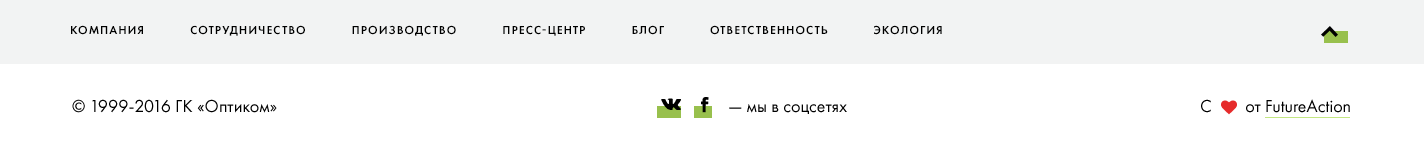
<style>
.page{position:relative;width:1424px;height:158px;background:#ffffff}
.page>*{position:absolute;margin:0}
.t1{font:12px "FuturaPT-Demi";letter-spacing:0.08em;color:#000000;text-transform:uppercase}
.t2{font:18px "FuturaPT-Book";color:#000000}
.t3{font:18px "Symbionite";color:#000000}
.t4{font:16px "Symbionite";color:#e62b2b}
</style>
<div class="page">
<p class="t1" style="left:71px;top:25px;width:871px;height:11px">Компания            Сотрудничество            Производство            Пресс-центр            Блог            Ответственность            Экология</p>
<p class="t2" style="left:72px;top:99px;width:205px;height:14px">© 1999-2016 ГК «Оптиком»</p>
<p class="t3" style="left:661px;top:98px;width:20px;height:12px">vk</p>
<p class="t3" style="left:701px;top:97px;width:8px;height:16px">facebook</p>
<p class="t2" style="left:1201px;top:99px;width:149px;height:14px">С        от FutureAction</p>
<p class="t4" style="left:1221px;top:100px;width:16px;height:15px">heart</p>
<p class="t2" style="left:729px;top:104px;width:118px;height:10px">— мы в соцсетях</p>
</div>
